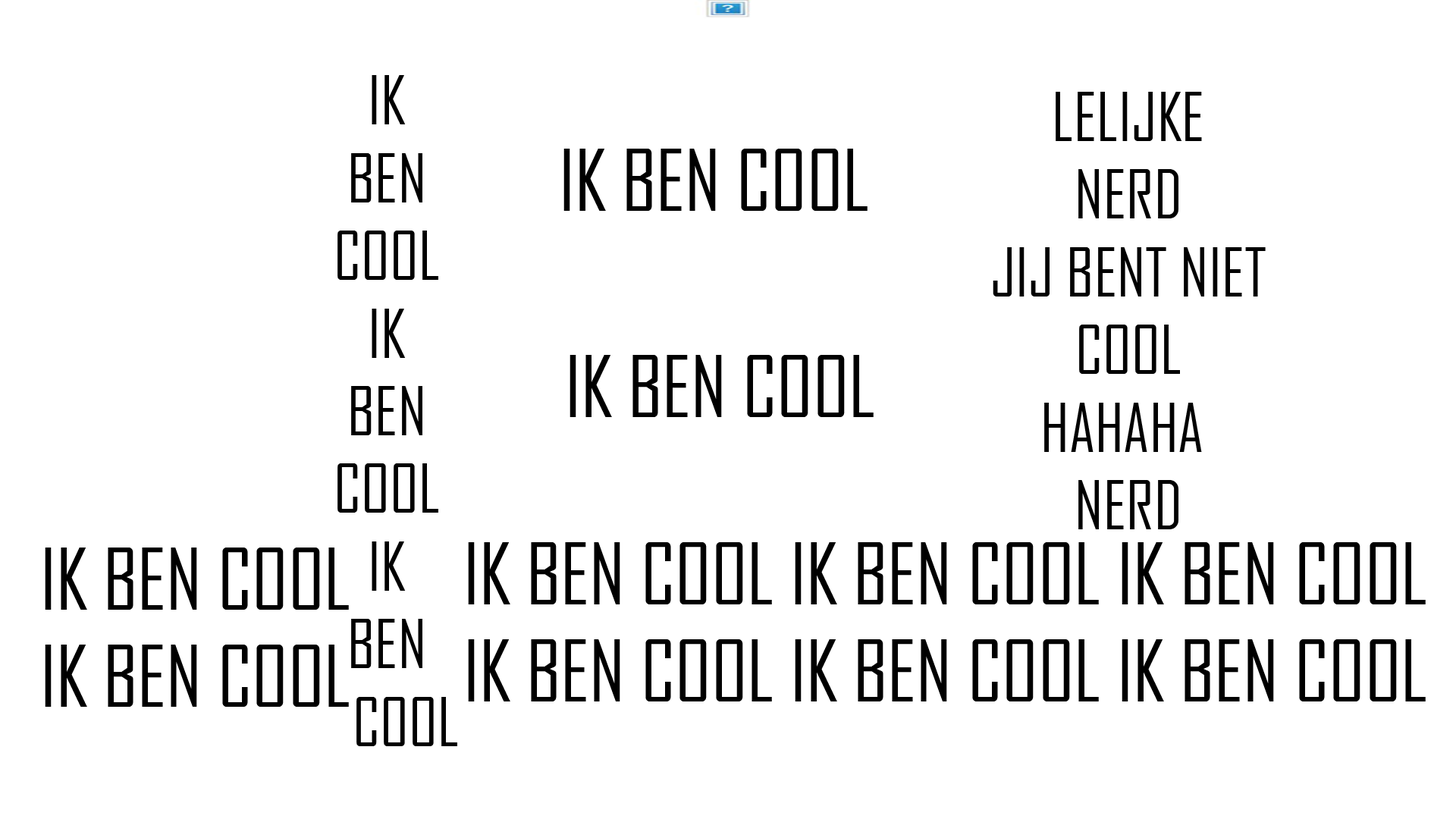
<style>
.page{position:relative;width:1456px;height:819px;background:#ffffff}
.page>*{position:absolute;margin:0}
.t1{font:64.7px "AgencyFB-Reg";color:#000000}
.t2{font:80.9px "AgencyFB-Reg";color:#000000}
</style>
<div class="page">
<p class="t1" style="left:337px;top:75px;width:120px;height:671px;text-align:center">IK<br>BEN<br>COOL<br>IK<br>BEN<br>COOL<br>IK<br>BEN<br>   COOL</p>
<p class="t1" style="left:993px;top:92px;width:273px;height:437px;text-align:center">LELIJKE<br>NERD<br>JIJ BENT NIET<br>COOL<br>HAHAHA <br>NERD</p>
<p class="t2" style="left:563px;top:149px;width:305px;height:62px">IK BEN COOL</p>
<p class="t2" style="left:570px;top:355px;width:304px;height:62px">IK BEN COOL</p>
<p class="t2" style="left:468px;top:542px;width:958px;height:159px;text-align:center">IK BEN COOL IK BEN COOL IK BEN COOL<br>IK BEN COOL IK BEN COOL IK BEN COOL</p>
<p class="t2" style="left:45px;top:548px;width:304px;height:159px;text-align:center">IK BEN COOL<br>IK BEN COOL</p>
</div>
